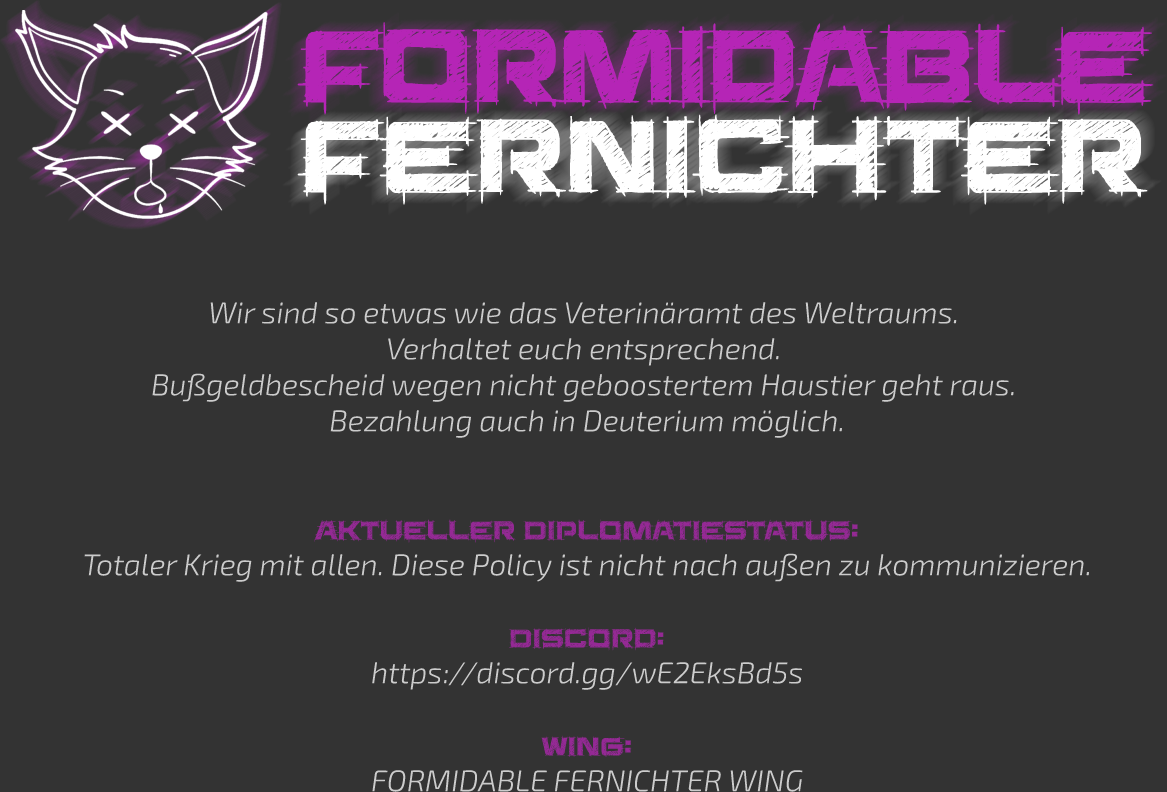
<style>
.page{position:relative;width:1167px;height:792px;background:#333333}
.page>*{position:absolute;margin:0}
.t1{font:120px/90px "SaucerBB";letter-spacing:-0.021em;color:#b525b6}
.t2{font:120px/90px "SaucerBB";color:#ffffff}
.t3{font:30px "Exo2-LightItalic";color:#cccccc}
.t4{font:30px "SaucerBB";color:#cccccc}
</style>
<div class="page">
<p class="t1" style="left:297px;top:22px;width:857px;height:183px">Formidable<br><span class="t2">Fernichter</span></p>
<p class="t3" style="left:84px;top:302px;width:1005px;height:490px;text-align:center">Wir sind so etwas wie das Veterinäramt des Weltraums. <br>Verhaltet euch entsprechend. <br>Bußgeldbescheid wegen nicht geboostertem Haustier geht raus. <br>Bezahlung auch in Deuterium möglich.<br><br><br><span class="t4">Aktueller Diplomatiestatus:<br></span>Totaler Krieg mit allen. Diese Policy ist nicht nach außen zu kommunizieren.<br><br><span class="t4">Discord:<br></span>https://discord.gg/wE2EksBd5s<br><br><span class="t4">Wing:<br></span>FORMIDABLE FERNICHTER WING</p>
</div>
